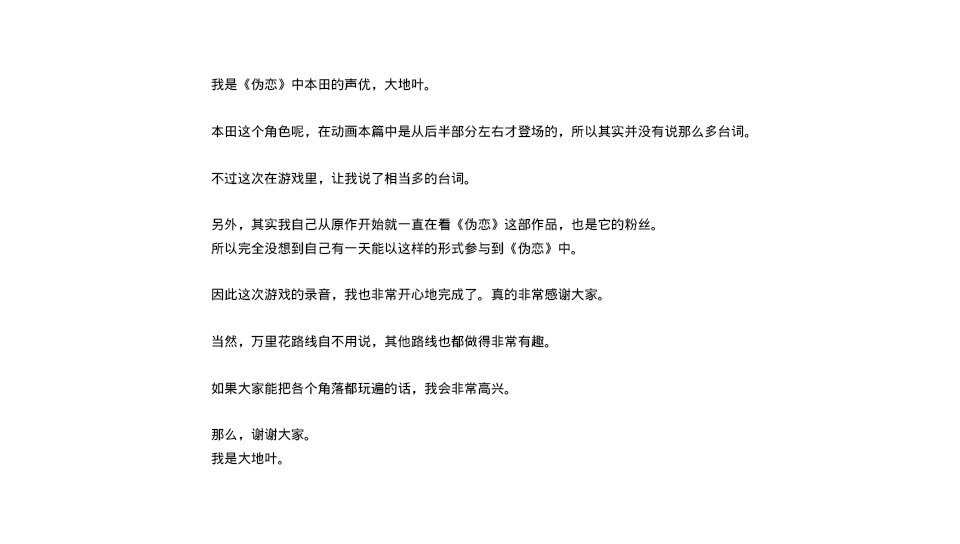
<style>
.page{position:relative;width:960px;height:544px;background:#ffffff}
.page>*{position:absolute;margin:0}
.t1{font:13.3px "WenQuanYiMicroHeiMono";color:#000000}
</style>
<div class="page">
<p class="t1" style="left:211px;top:78px;width:538px;height:387px">我是《伪恋》中本田的声优，大地叶。<br><br>本田这个角色呢，在动画本篇中是从后半部分左右才登场的，所以其实并没有说那么多台词。<br><br>不过这次在游戏里，让我说了相当多的台词。<br><br>另外，其实我自己从原作开始就一直在看《伪恋》这部作品，也是它的粉丝。<br>所以完全没想到自己有一天能以这样的形式参与到《伪恋》中。<br><br>因此这次游戏的录音，我也非常开心地完成了。真的非常感谢大家。<br><br>当然，万里花路线自不用说，其他路线也都做得非常有趣。<br><br>如果大家能把各个角落都玩遍的话，我会非常高兴。<br><br>那么，谢谢大家。<br>我是大地叶。</p>
</div>
